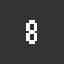
<style>
.page{position:relative;width:64px;height:64px;background:#333333}
.page>*{position:absolute;margin:0}
.t1{font:40.9px "Glasstown-NBP";letter-spacing:0.005em;color:#ffffff;font-weight:bold}
</style>
<div class="page">
<p class="t1" style="left:26px;top:20px;width:11px;height:24px">8</p>
</div>
